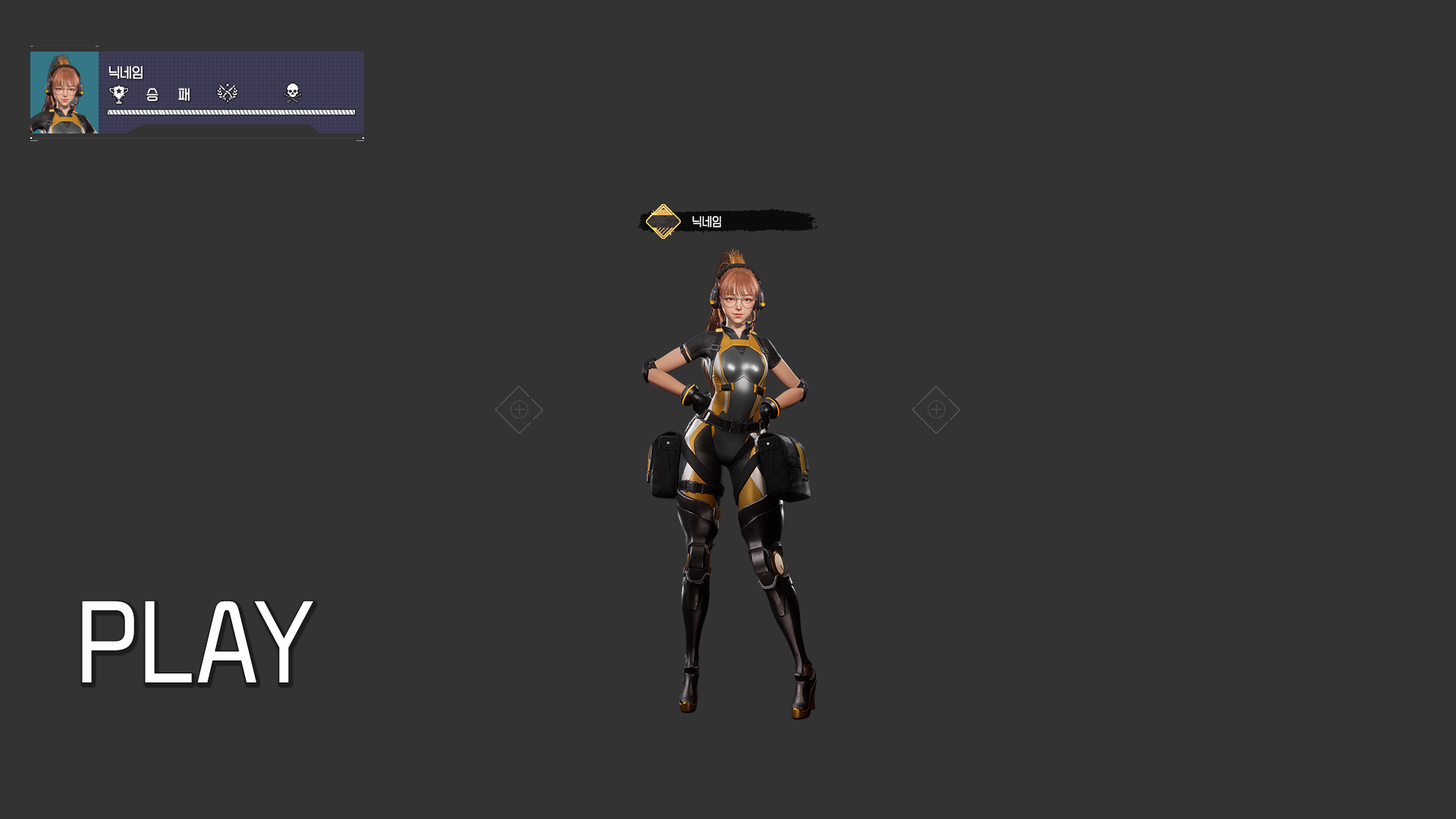
<style>
.page{position:relative;width:1456px;height:819px;background:#333333}
.page>*{position:absolute;margin:0}
.t1{font:13.6px "SEBANGGothic";letter-spacing:-0.03em;color:#ffffff;scale:0.97 1}
.t2{font:12.1px "SEBANGGothic";letter-spacing:0.01em;color:#ffffff;scale:0.9 1}
</style>
<div class="page">
<p class="t1" style="left:108px;top:66px;width:35px;height:13px">닉네임</p>
<p class="t1" style="left:146px;top:88px;width:12px;height:14px">승</p>
<p class="t1" style="left:178px;top:88px;width:12px;height:13px">패</p>
<p class="t2" style="left:692px;top:215px;width:29px;height:12px">닉네임</p>
</div>
